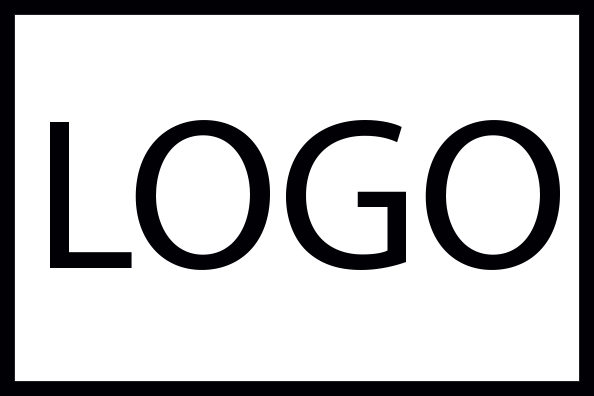
<style>
.page{position:relative;width:594px;height:396px;background:#ffffff}
.page>*{position:absolute;margin:0}
.t1{font:216.2px "MyriadPro-Regular";color:#000005}
</style>
<div class="page">
<p class="t1" style="left:50px;top:120px;width:510px;height:150px">LOGO</p>
</div>
